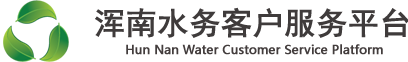
<style>
.page{position:relative;width:408px;height:62px;background:#ffffff}
.page>*{position:absolute;margin:0}
.t1{font:31px "SimHei";color:#3f3b3b;font-weight:bold}
.t2{font:12px "MicrosoftYaHei";color:#433d3d;font-weight:bold}
</style>
<div class="page">
<p class="t1" style="left:95px;top:7px;width:315px;height:31px">浑南水务客户服务平台</p>
<p class="t2" style="left:126px;top:44px;width:257px;height:11px">Hun Nan Water Customer Service Platform</p>
</div>
